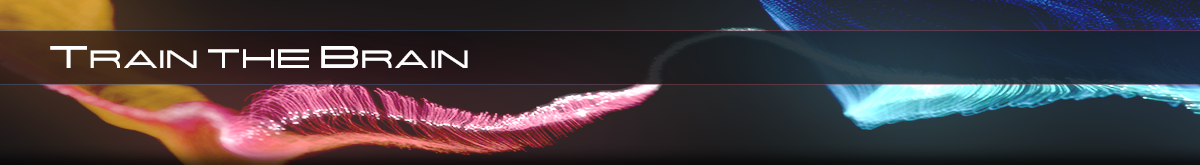
<style>
.page{position:relative;width:1200px;height:165px}
.page>*{position:absolute;margin:0}
.t1{font:25px "Centauri";color:#ffffff}
.t2{font:31.5px "Centauri";color:#ffffff}
.t3{font:26.8px "Centauri";color:#ffffff}
</style>
<div class="page">
<p class="t1" style="left:50px;top:46px;width:418px;height:22px"><span class="t2">T</span>RAIN <span class="t3">THE</span><span class="t2"> B</span>RAIN</p>
</div>
